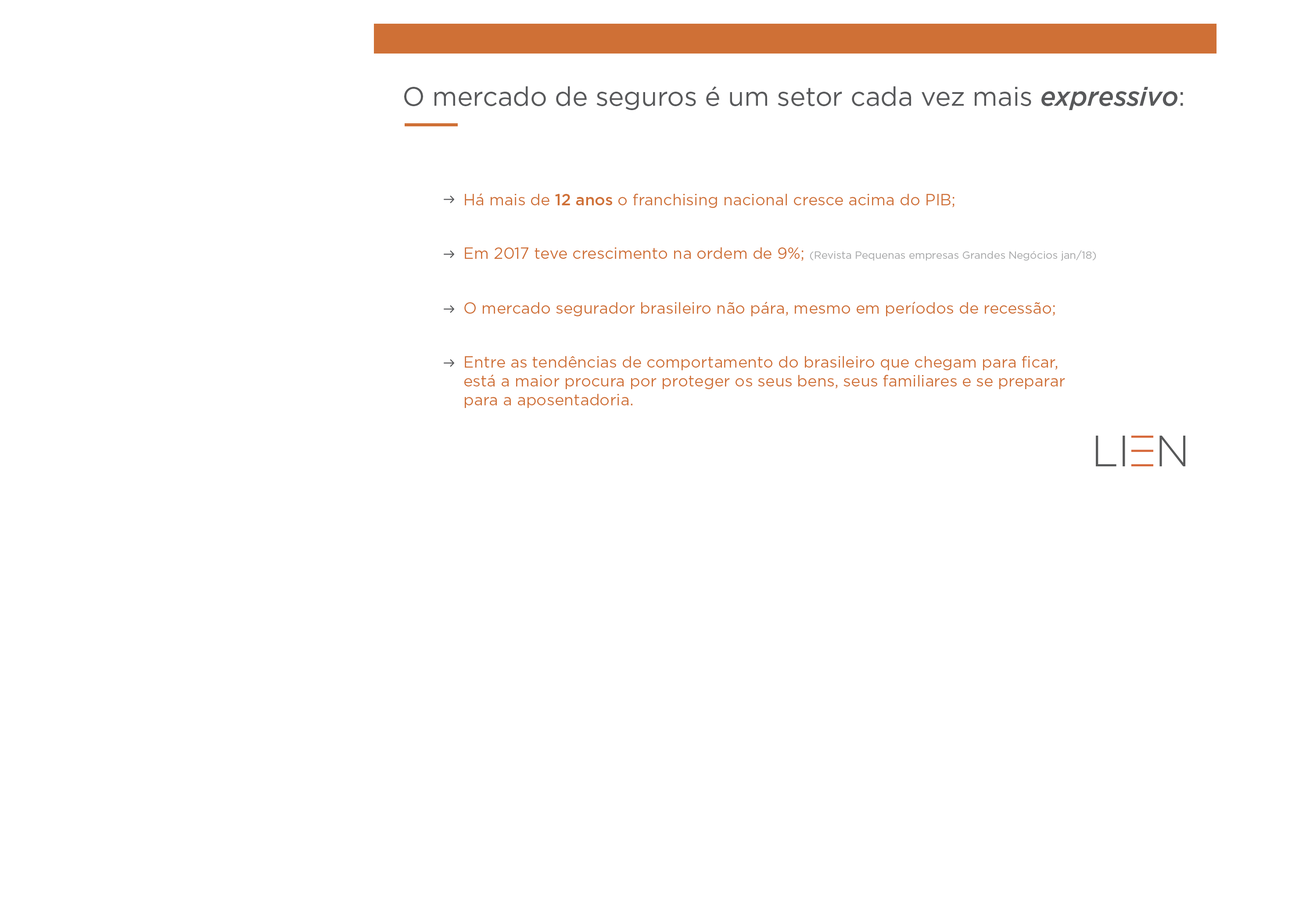
<style>
.page{position:relative;width:1292px;height:923px;background:#ffffff}
.page>*{position:absolute;margin:0}
.t1{font:26.3px "Gotham-Book";letter-spacing:-0.005em;color:#58595b}
.t2{font:26.3px "Gotham-MediumItalic";letter-spacing:-0.005em;color:#58595b}
.t3{font:15.8px "Gotham-Book";color:#cf7036}
.t4{font:15.8px "Gotham-Medium";color:#cf7036}
.t5{font:10.5px "Gotham-Book";color:#a6a7a8}
</style>
<div class="page">
<p class="t1" style="left:404px;top:86px;width:779px;height:24px">O mercado de seguros é um setor cada vez mais <span class="t2">expressivo</span>:</p>
<p class="t3" style="left:465px;top:193px;width:489px;height:15px">Há mais de <span class="t4">12 anos</span> o franchising nacional cresce acima do PIB;</p>
<p class="t5" style="left:465px;top:247px;width:631px;height:14px"><span class="t3">Em 2017 teve crescimento na ordem de 9%; </span>(Revista Pequenas empresas Grandes Negócios jan/18)</p>
<p class="t3" style="left:464px;top:301px;width:591px;height:15px">O mercado segurador brasileiro não pára, mesmo em períodos de recessão;</p>
<p class="t3" style="left:464px;top:356px;width:601px;height:52px">Entre as tendências de comportamento do brasileiro que chegam para ficar, <br>está a maior procura por proteger os seus bens, seus familiares e se preparar <br>para a aposentadoria.</p>
</div>
